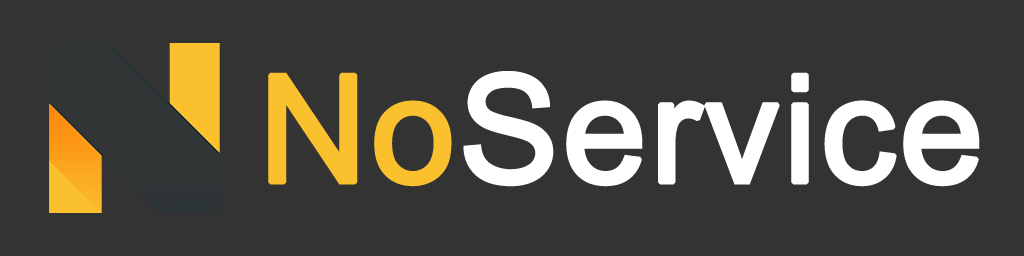
<style>
.page{position:relative;width:1024px;height:256px;background:#333333}
.page>*{position:absolute;margin:0}
.t1{font:150px "ArialMT";color:#ffffff;font-weight:bold}
.t2{font:150px "ArialMT";color:#fbc02d;font-weight:bold}
</style>
<div class="page">
<p class="t1" style="left:268px;top:71px;width:712px;height:116px"><span class="t2">No</span>Service</p>
</div>
